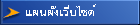
<style>
.page{position:relative;width:140px;height:25px}
.page>*{position:absolute;margin:0}
.t1{font:15.3px "EucrosiaDSE";color:#ffffff;scale:1.12 1}
</style>
<div class="page">
<p class="t1" style="left:26px;top:4px;width:70px;height:12px">á¼¹¼Ñ§àÇçºä«µì</p>
</div>
